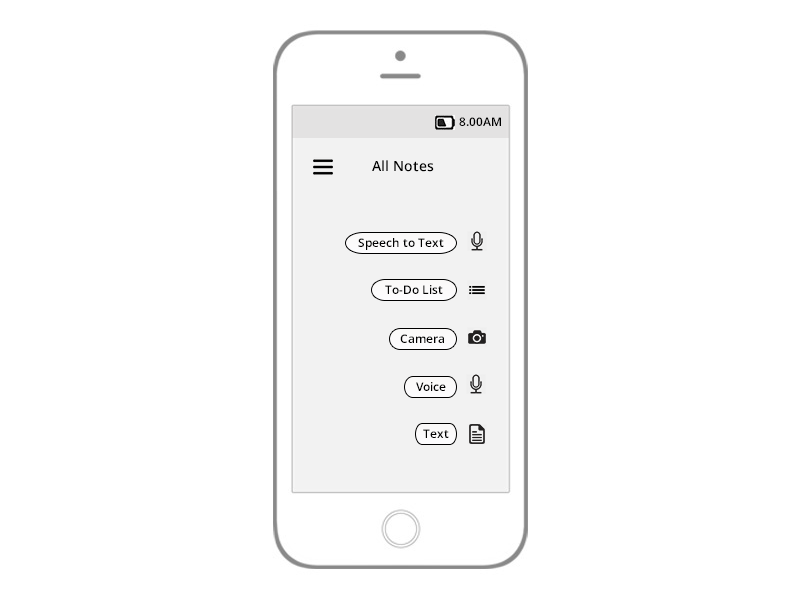
<style>
.page{position:relative;width:800px;height:600px;background:#ffffff}
.page>*{position:absolute;margin:0}
.t1{font:12px "OpenSans-Semibold";color:#000000}
.t2{font:14px "OpenSans-Semibold";color:#000000}
</style>
<div class="page">
<p class="t1" style="left:459px;top:117px;width:42px;height:9px">8.00AM</p>
<p class="t2" style="left:372px;top:160px;width:62px;height:12px">All Notes</p>
<p class="t1" style="left:358px;top:238px;width:86px;height:12px">Speech to Text</p>
<p class="t1" style="left:385px;top:285px;width:58px;height:9px">To-Do List</p>
<p class="t1" style="left:400px;top:334px;width:44px;height:9px">Camera</p>
<p class="t1" style="left:416px;top:382px;width:30px;height:9px">Voice</p>
<p class="t1" style="left:423px;top:429px;width:26px;height:9px">Text</p>
</div>
